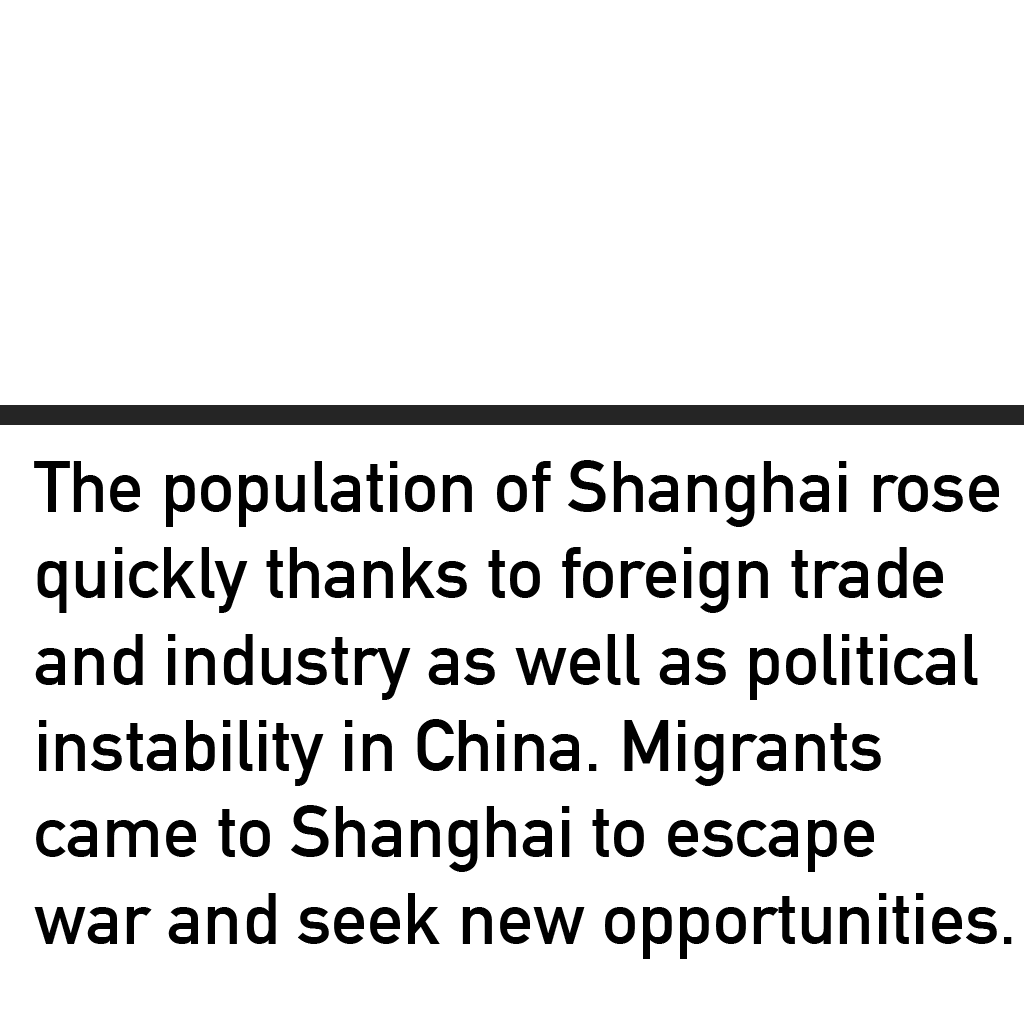
<style>
.page{position:relative;width:1024px;height:1024px;background:#ffffff}
.page>*{position:absolute;margin:0}
.t1{font:72px "DINAlternate-Bold";color:#000000}
</style>
<div class="page">
<p class="t1" style="left:34px;top:460px;width:978px;height:499px">The population of Shanghai rose<br>quickly thanks to foreign trade<br>and industry as well as political<br>instability in China. Migrants<br>came to Shanghai to escape <br>war and seek new opportunities.</p>
</div>
